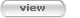
<style>
.page{position:relative;width:80px;height:18px;background:#ffffff}
.page>*{position:absolute;margin:0}
.t1{font:10px "Verdana-Bold";color:#6b6b6b}
</style>
<div class="page">
<p class="t1" style="left:20px;top:4px;width:25px;height:7px">view</p>
</div>
